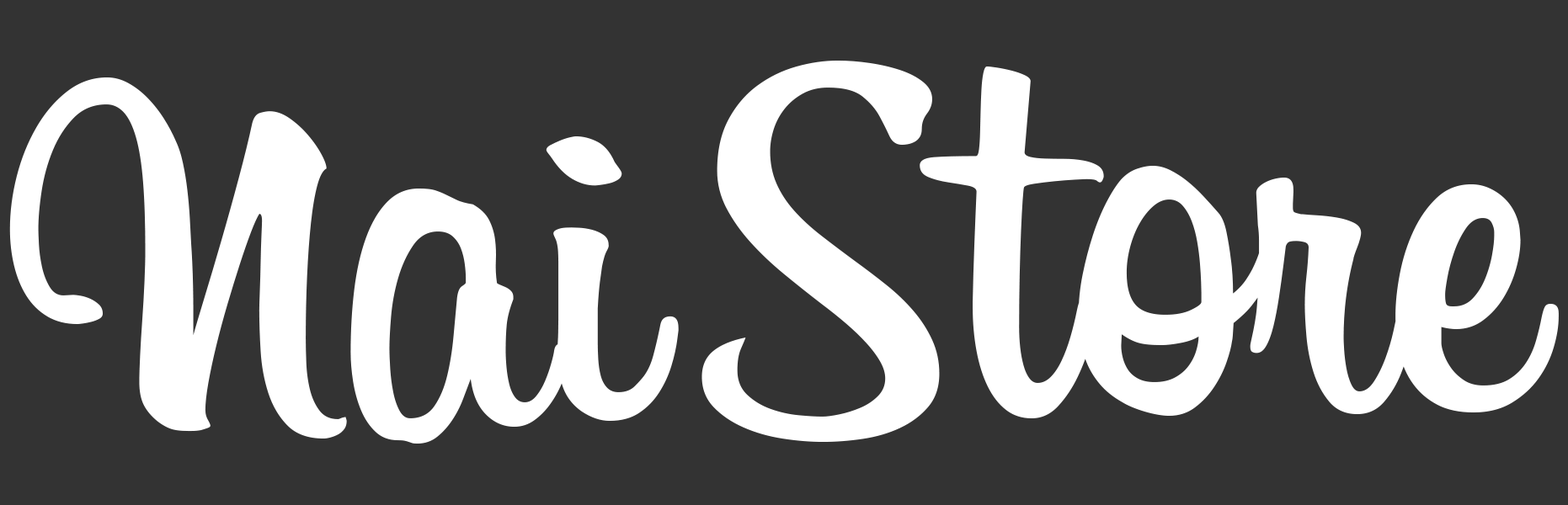
<style>
.page{position:relative;width:1568px;height:505px;background:#333333}
.page>*{position:absolute;margin:0}
.t1{font:545.3px "Billabong";color:#ffffff}
</style>
<div class="page">
<p class="t1" style="left:701px;top:61px;width:858px;height:381px">Store</p>
<p class="t1" style="left:9px;top:77px;width:670px;height:367px">Nai</p>
</div>
